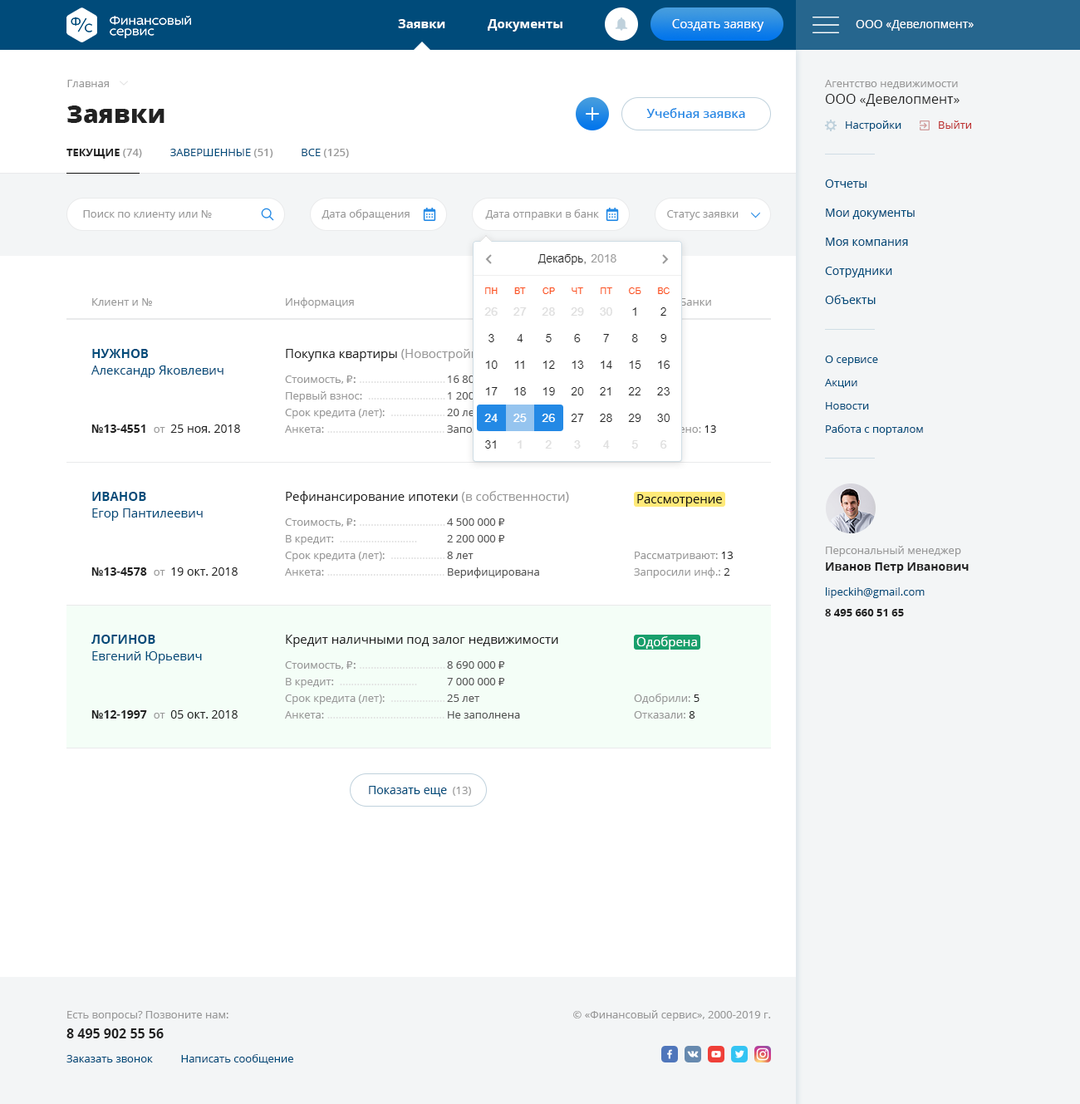
<style>
.page{position:relative;width:1080px;height:1104px;background:#ffffff}
.page>*{position:absolute;margin:0}
.t1{font:12.5px "OpenSans-Bold";color:#ffffff}
.t2{font:12.5px "OpenSans";color:#ffffff}
.t3{font:11.6px "OpenSans";color:#ffffff}
.t4{font:10.8px "OpenSans";color:#999999}
.t5{font:13.3px/16.6px "OpenSans";color:#222222}
.t6{font:24.9px "OpenSans-Extrabold";color:#222222}
.t7{font:12.5px "OpenSans-Semibold";color:#2389e5}
.t8{font:10.8px "OpenSans";color:#004b7a}
.t9{font:10.8px "OpenSans";color:#be3030}
.t10{font:10.8px "OpenSans";color:#004b7a;text-transform:uppercase}
.t11{font:10.8px "OpenSans-Bold";color:#222222;text-transform:uppercase}
.t12{font:10.8px "OpenSans-Semibold";color:#999999;text-transform:uppercase}
.t13{font:11.6px/29.1px "OpenSans";color:#004b7a}
.t14{font:10.8px "OpenSans"}
.t15{font:12.5px/16.6px "OpenSans";color:#004b7a}
.t16{font:12.5px/16.6px "OpenSans-Bold";color:#004b7a;text-transform:uppercase}
.t17{font:10.8px/16.6px "OpenSans";color:#e1e1e1}
.t18{font:12.5px "OpenSans";color:#222222}
.t19{font:12.5px "OpenSans";color:#999999}
.t20{font:12.5px/19.9px "OpenSans";color:#999999}
.t21{font:10.8px/24.9px "OpenSans";color:#999999}
.t22{font:10.8px/24.9px "Tahoma";color:#999999}
.t23{font:10.8px/24.9px "OpenSans";color:#e1e1e1}
.t24{font:10.8px/16.6px "OpenSans";color:#999999}
.t25{font:10.8px/23.3px "OpenSans";color:#004b7a}
.t26{font:10.8px/16.6px "OpenSans"}
.t27{font:10.8px/16.6px "Tahoma"}
.t28{font:11.6px "OpenSans";color:#222222}
.t29{font:11.6px "OpenSans-Bold";color:#222222}
.t30{font:12.5px/16.6px "OpenSans";color:#999999}
.t31{font:12.5px "OpenSans";color:#111111}
.t32{font:10.8px/16.6px "OpenSans";color:#555555}
.t33{font:10.8px/16.6px "Tahoma";color:#555555}
.t34{font:11.6px/16.6px "OpenSans-Bold";color:#222222}
.t35{font:10.8px/16.6px "OpenSans";color:#222222}
.t36{font:10.8px "OpenSans-Bold";color:#222222}
.t37{font:12.5px/16.6px "OpenSans";color:#222222}
.t38{font:11.6px "OpenSans";color:#004b7a}
.t39{font:10.8px/19.9px "OpenSans";color:#999999}
.t40{font:13.3px/19.9px "OpenSans-Bold";color:#222222}
</style>
<div class="page">
<p class="t1" style="left:398px;top:19px;width:164px;height:13px">Заявки             Документы</p>
<p class="t2" style="left:672px;top:19px;width:92px;height:13px">Создать заявку</p>
<p class="t3" style="left:856px;top:20px;width:118px;height:11px">ООО «Девелопмент»</p>
<p class="t4" style="left:67px;top:80px;width:42px;height:7px">Главная</p>
<p class="t4" style="left:825px;top:80px;width:135px;height:26px">Агентство недвижимости<br><span class="t5">ООО «Девелопмент»</span></p>
<p class="t6" style="left:67px;top:106px;width:97px;height:17px">Заявки</p>
<p class="t7" style="left:646px;top:108px;width:99px;height:10px">Учебная заявка</p>
<p class="t8" style="left:846px;top:120px;width:125px;height:11px">Настройки             <span class="t9">Выйти</span></p>
<p class="t10" style="left:66px;top:149px;width:283px;height:10px"><span class="t11">текущие</span><span class="t12"> (74)          </span>завершенные<span class="t12"> (51)          </span>Все<span class="t12"> (125)</span></p>
<p class="t13" style="left:825px;top:179px;width:90px;height:125px">Отчеты<br>Мои документы<br>Моя компания<br>Сотрудники<br>Объекты</p>
<p class="t4" style="left:322px;top:209px;width:88px;height:11px">Дата обращения</p>
<p class="t4" style="left:485px;top:209px;width:114px;height:11px">Дата отправки в банк</p>
<p class="t4" style="left:83px;top:210px;width:129px;height:10px">Поиск по клиенту или №</p>
<p class="t4" style="left:667px;top:210px;width:72px;height:10px">Статус заявки</p>
<p class="t4" style="left:92px;top:298px;width:60px;height:8px">Клиент и №</p>
<p class="t4" style="left:286px;top:297px;width:68px;height:11px">Информация</p>
<p class="t14" style="left:634px;top:298px;width:77px;height:10px">Статус и Банки</p>
<p class="t15" style="left:91px;top:349px;width:132px;height:29px"><span class="t16">Нужнов <br></span>Александр Яковлевич</p>
<p class="t17" style="left:285px;top:349px;width:203px;height:84px"><span class="t18">Покупка квартиры </span><span class="t19">(</span><span class="t20">Новостройка)<br></span><span class="t21">Стоимость, </span><span class="t22">₽:</span><span class="t23"> ..............................<br></span><span class="t24">Первый взнос: </span> ...........................<br><span class="t24">Срок кредита (лет): </span> ...................<br><span class="t24">Анкета:</span> .........................................</p>
<p class="t25" style="left:825px;top:356px;width:98px;height:79px">О сервисе<br>Акции<br>Новости<br>Работа с порталом</p>
<p class="t26" style="left:447px;top:376px;width:97px;height:58px">16 800 000 <span class="t27">₽     <br></span>1 200 000 <span class="t27">₽</span> - 7,1%<br>20 лет<br>Заполняется (50%)</p>
<p class="t28" style="left:91px;top:425px;width:149px;height:8px"><span class="t29">№13-4551  </span><span class="t4">от  </span>25 ноя. 2018</p>
<p class="t14" style="left:634px;top:425px;width:82px;height:10px">Отправлено: 13</p>
<p class="t15" style="left:92px;top:492px;width:111px;height:29px"><span class="t16">Иванов <br></span>Егор Пантилеевич</p>
<p class="t17" style="left:285px;top:491px;width:284px;height:85px"><span class="t18">Рефинансирование ипотеки </span><span class="t19">(</span><span class="t20">в </span><span class="t30">собственности)<br></span><span class="t21">Стоимость, </span><span class="t22">₽:</span><span class="t23"> ..............................<br></span><span class="t24">В кредит: </span> ...........................<br><span class="t24">Срок кредита (лет): </span> ...................<br><span class="t24">Анкета:</span> .........................................</p>
<p class="t31" style="left:637px;top:494px;width:85px;height:13px">Рассмотрение</p>
<p class="t32" style="left:447px;top:518px;width:92px;height:60px">4 500 000 <span class="t33">₽     <br></span>2 200 000 <span class="t33">₽<br></span>8 лет<br>Верифицирована</p>
<p class="t4" style="left:826px;top:546px;width:143px;height:27px">Персональный менеджер<br><span class="t34">Иванов Петр Иванович</span></p>
<p class="t24" style="left:634px;top:552px;width:99px;height:26px">Рассматривают: <span class="t35">13<br></span>Запросили инф.: <span class="t35">2</span></p>
<p class="t28" style="left:91px;top:567px;width:147px;height:9px"><span class="t29">№13-4578  </span><span class="t4">от  </span>19 окт. 2018</p>
<p class="t8" style="left:826px;top:587px;width:99px;height:11px">lipeckih@gmail.com</p>
<p class="t36" style="left:825px;top:609px;width:79px;height:7px">8 495 660 51 65</p>
<p class="t15" style="left:91px;top:635px;width:111px;height:29px"><span class="t16">Логинов <br></span>Евгений Юрьевич</p>
<p class="t17" style="left:285px;top:635px;width:273px;height:84px"><span class="t18">Кредит наличными под залог </span><span class="t37">недвижимости<br></span><span class="t21">Стоимость, </span><span class="t22">₽:</span><span class="t23"> ..............................<br></span><span class="t24">В кредит: </span> ...........................<br><span class="t24">Срок кредита (лет): </span> ...................<br><span class="t24">Анкета:</span> .........................................</p>
<p class="t2" style="left:636px;top:636px;width:61px;height:14px">Одобрена</p>
<p class="t32" style="left:447px;top:661px;width:73px;height:58px">8 690 000 <span class="t33">₽     <br></span>7 000 000 <span class="t33">₽<br></span>25 лет<br>Не заполнена</p>
<p class="t24" style="left:634px;top:694px;width:66px;height:25px">Одобрили: <span class="t35">5<br></span>Отказали: <span class="t35">8</span></p>
<p class="t28" style="left:91px;top:710px;width:147px;height:9px"><span class="t29">№12-1997  </span><span class="t4">от  </span>05 окт. 2018</p>
<p class="t38" style="left:369px;top:786px;width:102px;height:11px">Показать еще <span class="t4"> (13)</span></p>
<p class="t39" style="left:66px;top:1011px;width:162px;height:27px">Есть вопросы? Позвоните нам:<br><span class="t40">8 495 902 55 56</span></p>
<p class="t4" style="left:573px;top:1010px;width:198px;height:11px">© «Финансовый сервис», 2000-2019 г.</p>
<p class="t8" style="left:66px;top:1054px;width:227px;height:10px">Заказать звонок          Написать сообщение</p>
</div>
